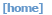
<style>
.page{position:relative;width:52px;height:15px;background:#ffffff}
.page>*{position:absolute;margin:0}
.t1{font:11px "Verdana-Bold";letter-spacing:-0.08em;color:#6699cc}
</style>
<div class="page">
<p class="t1" style="left:3px;top:3px;width:40px;height:11px">[home]</p>
</div>
